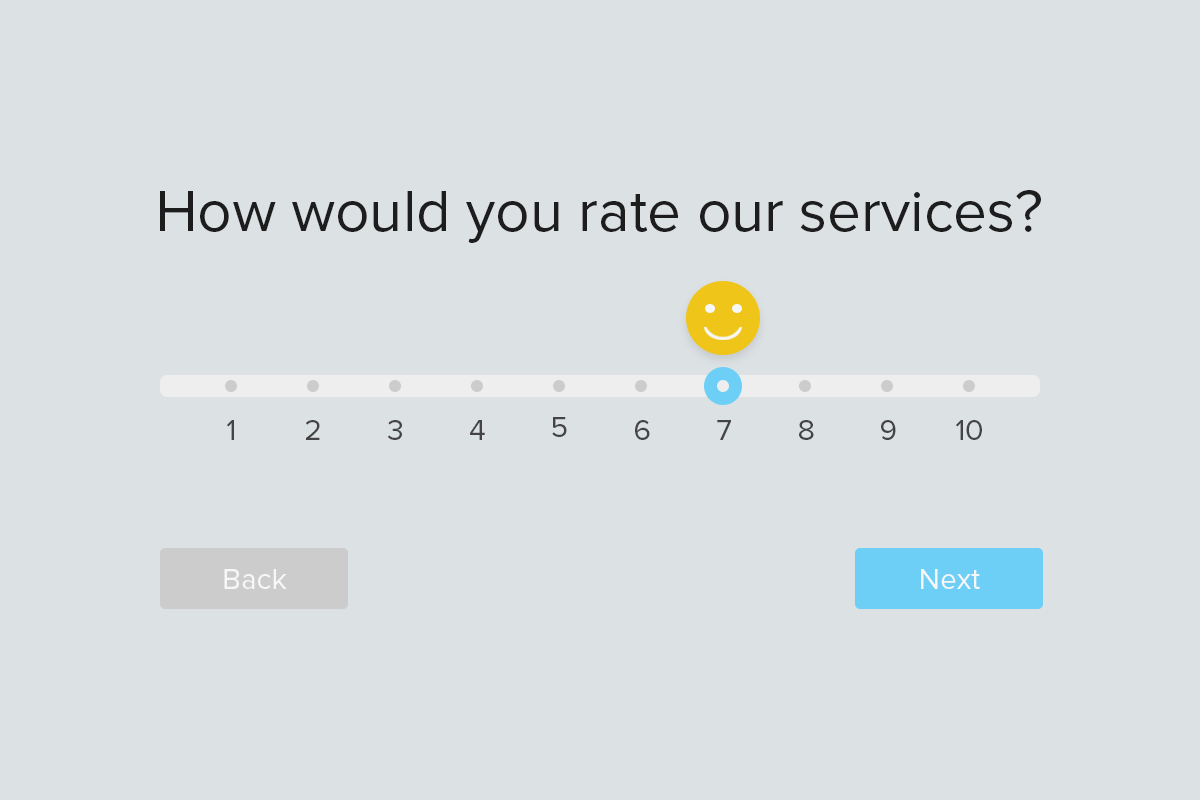
<style>
.page{position:relative;width:1200px;height:800px;background:#dce1e4}
.page>*{position:absolute;margin:0}
.t1{font:60px "ProximaNova-Regular";color:#1d1d1d}
.t2{font:30px "ProximaNova-Regular";color:#444444}
.t3{font:30px "ProximaNova-Regular";color:#f7f7f7}
</style>
<div class="page">
<p class="t1" style="left:160px;top:190px;width:881px;height:53px">How would you rate our services?</p>
<p class="t2" style="left:226px;top:420px;width:8px;height:20px">1</p>
<p class="t2" style="left:306px;top:420px;width:14px;height:20px">2</p>
<p class="t2" style="left:387px;top:420px;width:15px;height:20px">3</p>
<p class="t2" style="left:470px;top:420px;width:15px;height:20px">4</p>
<p class="t2" style="left:552px;top:417px;width:15px;height:20px">5</p>
<p class="t2" style="left:635px;top:420px;width:15px;height:20px">6</p>
<p class="t2" style="left:717px;top:420px;width:14px;height:20px">7</p>
<p class="t2" style="left:799px;top:420px;width:15px;height:20px">8</p>
<p class="t2" style="left:881px;top:420px;width:15px;height:20px">9</p>
<p class="t2" style="left:955px;top:420px;width:27px;height:20px">10</p>
<p class="t3" style="left:224px;top:569px;width:63px;height:20px">Back</p>
<p class="t3" style="left:921px;top:569px;width:59px;height:20px">Next</p>
</div>
